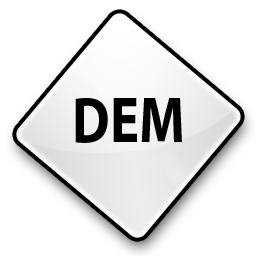
<style>
.page{position:relative;width:256px;height:256px;background:#ffffff}
.page>*{position:absolute;margin:0}
.t1{font:66px "MyriadPro-Bold";letter-spacing:0.005em;color:#010101;scale:0.82 1}
</style>
<div class="page">
<p class="t1" style="left:75px;top:98px;width:107px;height:45px">DEM</p>
</div>
